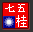
<style>
.page{position:relative;width:33px;height:32px;background:#f20000}
.page>*{position:absolute;margin:0}
.t1{font:10.4px "SimSun";color:#ffffff}
.t2{font:11.7px "SimSun";color:#ffffff}
</style>
<div class="page">
<p class="t1" style="left:5px;top:4px;width:20px;height:8px">七五</p>
<p class="t2" style="left:16px;top:15px;width:11px;height:12px">桂</p>
</div>
